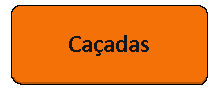
<style>
.page{position:relative;width:220px;height:92px;background:#f47107}
.page>*{position:absolute;margin:0}
.t1{font:25px "Calibri-Bold";color:#141619}
</style>
<div class="page">
<p class="t1" style="left:69px;top:35px;width:80px;height:21px">Caçadas</p>
</div>
